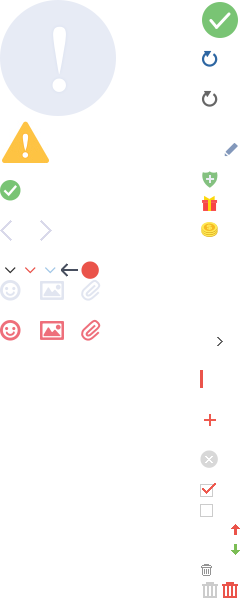
<style>
.page{position:relative;width:240px;height:600px;background:#ffffff}
.page>*{position:absolute;margin:0}
.t1{font:5.6px "FZLTCHK--GBK1-0";color:#ffe756;font-weight:bold;scale:1.51 1}
.t2{font:14px "SimSun";color:#333333;font-weight:bold}
.t3{font:14px "SimSun";color:#ea534a;font-weight:bold}
.t4{font:14px "SimSun";color:#a1c7e7;font-weight:bold}
.t5{font:12px "SimSun";color:#666666;font-weight:bold}
</style>
<div class="page">
<p class="t1" style="left:206px;top:224px;width:6px;height:6px;rotate:-5deg">$</p>
<p class="t2" style="left:5px;top:267px;width:11px;height:7px;rotate:90deg">&gt;</p>
<p class="t3" style="left:25px;top:267px;width:11px;height:7px;rotate:90deg">&gt;</p>
<p class="t4" style="left:45px;top:267px;width:11px;height:7px;rotate:90deg">&gt;</p>
<p class="t5" style="left:217px;top:337px;width:6px;height:9px">&gt;</p>
</div>
